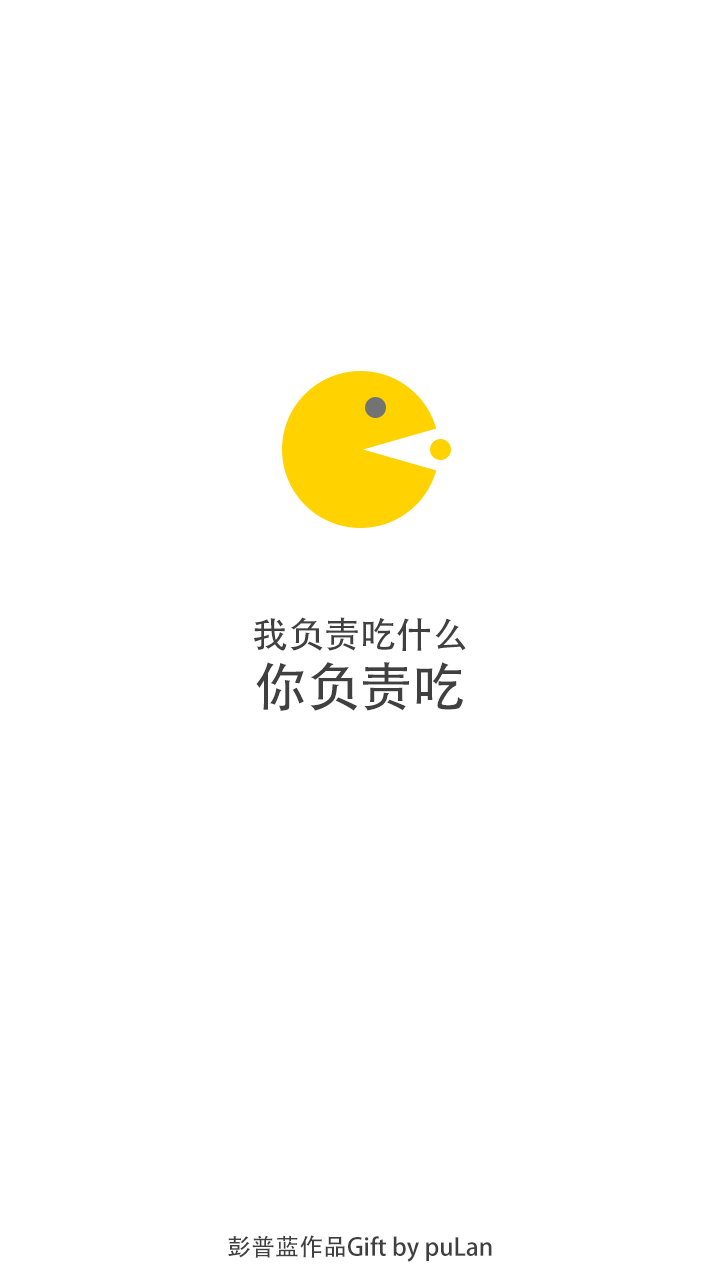
<style>
.page{position:relative;width:720px;height:1280px;background:#ffffff}
.page>*{position:absolute;margin:0}
.t1{font:36px "AdobeHeitiStd-Regular";color:#404040}
.t2{font:52.8px "AdobeHeitiStd-Regular";color:#404040}
.t3{font:24px "AdobeHeitiStd-Regular";color:#404040}
</style>
<div class="page">
<p class="t1" style="left:253px;top:617px;width:213px;height:34px">我负责吃什么</p>
<p class="t2" style="left:256px;top:662px;width:207px;height:49px">你负责吃</p>
<p class="t3" style="left:228px;top:1235px;width:264px;height:27px">彭普蓝作品Gift by puLan</p>
</div>
